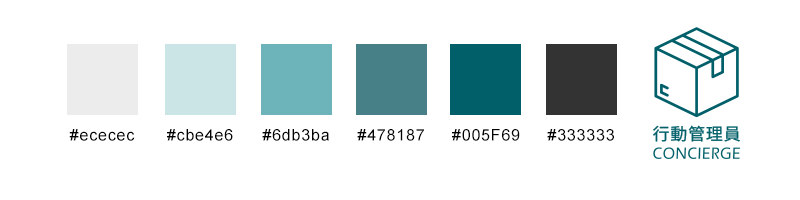
<style>
.page{position:relative;width:800px;height:200px;background:#ffffff}
.page>*{position:absolute;margin:0}
.t1{font:16px "ArialMT";letter-spacing:0.05em;color:#010101}
</style>
<div class="page">
<p class="t1" style="left:69px;top:129px;width:66px;height:12px">#ececec</p>
<p class="t1" style="left:167px;top:129px;width:66px;height:12px">#cbe4e6</p>
<p class="t1" style="left:262px;top:129px;width:67px;height:12px">#6db3ba</p>
<p class="t1" style="left:357px;top:129px;width:67px;height:12px">#478187</p>
<p class="t1" style="left:452px;top:129px;width:68px;height:12px">#005F69</p>
<p class="t1" style="left:547px;top:129px;width:67px;height:12px">#333333</p>
</div>
